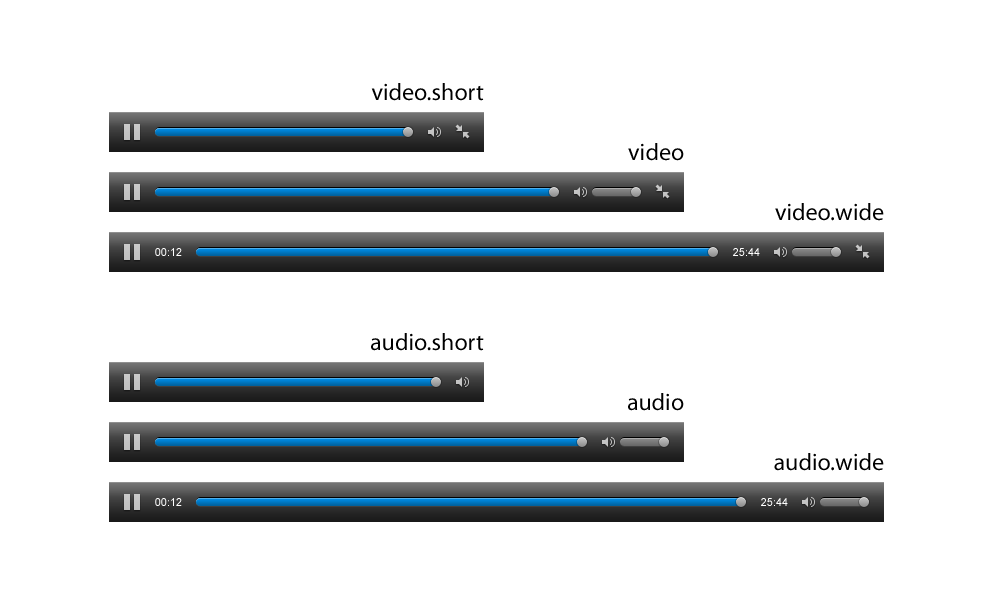
<style>
.page{position:relative;width:1000px;height:600px;background:#ffffff}
.page>*{position:absolute;margin:0}
.t1{font:24px "MyriadPro-Regular";color:#000000}
.t2{font:11px "ArialMT";color:#ffffff}
</style>
<div class="page">
<p class="t1" style="left:371px;top:83px;width:113px;height:18px">video.short</p>
<p class="t1" style="left:628px;top:143px;width:56px;height:18px">video</p>
<p class="t1" style="left:775px;top:203px;width:109px;height:18px">video.wide</p>
<p class="t2" style="left:155px;top:248px;width:27px;height:8px">00:12</p>
<p class="t2" style="left:733px;top:248px;width:27px;height:8px">25:44</p>
<p class="t1" style="left:371px;top:333px;width:113px;height:18px">audio.short</p>
<p class="t1" style="left:628px;top:393px;width:56px;height:18px">audio</p>
<p class="t1" style="left:774px;top:453px;width:110px;height:18px">audio.wide</p>
<p class="t2" style="left:155px;top:498px;width:27px;height:8px">00:12</p>
<p class="t2" style="left:761px;top:498px;width:27px;height:8px">25:44</p>
</div>
